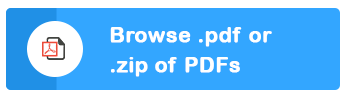
<style>
.page{position:relative;width:345px;height:98px;background:#33a6ff}
.page>*{position:absolute;margin:0}
.t1{font:21.4px/30.2px "ArialRoundedMTBold";color:#ffffff;font-weight:bold}
</style>
<div class="page">
<p class="t1" style="left:110px;top:27px;width:162px;height:50px">Browse .pdf or <br>.zip of PDFs</p>
</div>
